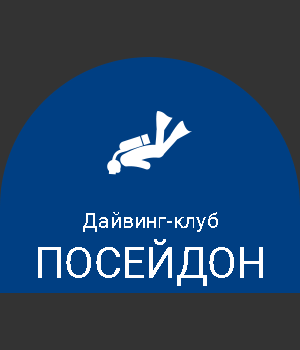
<style>
.page{position:relative;width:300px;height:350px;background:#003f83}
.page>*{position:absolute;margin:0}
.t1{font:21.3px "Roboto-Regular";color:#ffffff}
.t2{font:42.6px "Roboto-Regular";color:#ffffff}
</style>
<div class="page">
<p class="t1" style="left:83px;top:212px;width:135px;height:20px">Дайвинг-клуб</p>
<p class="t2" style="left:38px;top:239px;width:225px;height:47px">ПОСЕЙДОН</p>
</div>
